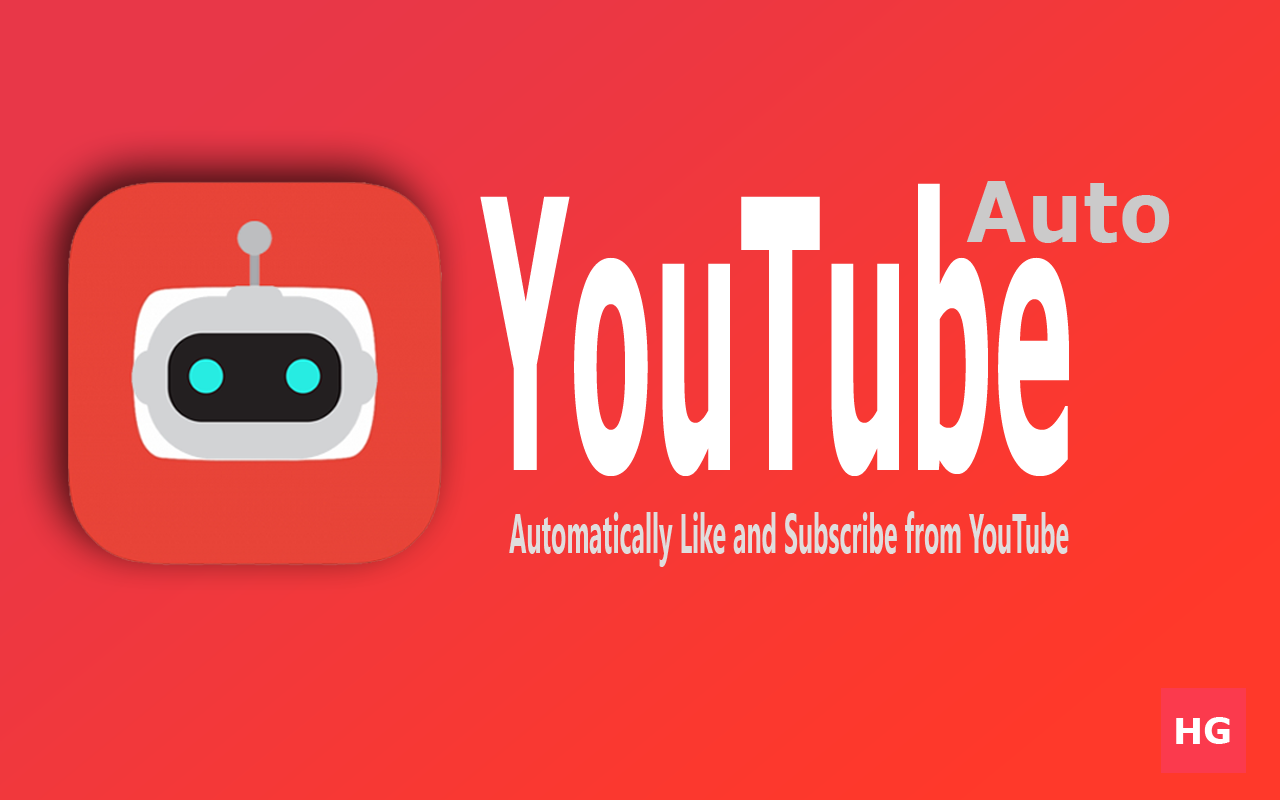
<style>
.page{position:relative;width:1280px;height:800px}
.page>*{position:absolute;margin:0}
.t1{font:376.4px "Verdana-Bold";color:#ffffff;scale:0.32 1}
.t2{font:54.9px "SegoeUI-Bold";color:#e0dddd;scale:0.45 1}
.t3{font:36px "Verdana-Bold";color:#ffffff}
</style>
<div class="page">
<p class="t1" style="left:480px;top:183px;width:589px;height:293px">YouTube</p>
<p class="t2" style="left:509px;top:511px;width:560px;height:56px">Automatically Like and Subscribe from YouTube</p>
<p class="t3" style="left:1176px;top:717px;width:54px;height:27px">HG</p>
</div>
